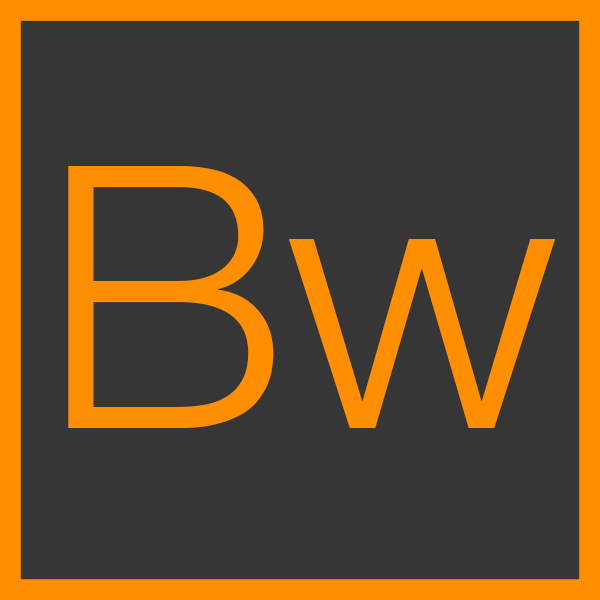
<style>
.page{position:relative;width:600px;height:600px;background:#363636}
.page>*{position:absolute;margin:0}
.t1{font:366.7px "HelveticaNeue-Light";color:#ff8f00}
</style>
<div class="page">
<p class="t1" style="left:68px;top:166px;width:488px;height:262px">Bw</p>
</div>
